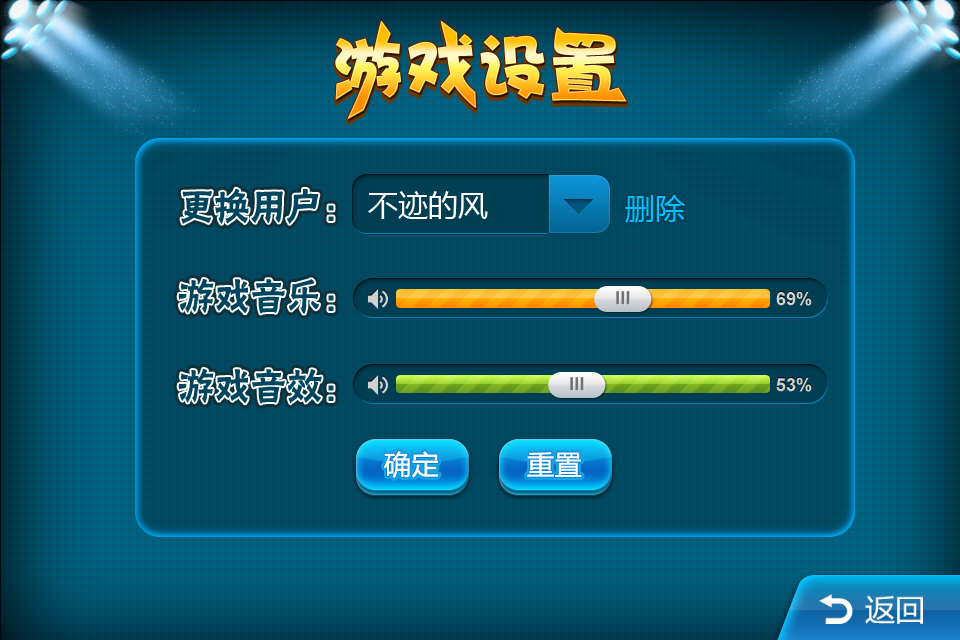
<style>
.page{position:relative;width:960px;height:640px}
.page>*{position:absolute;margin:0}
.t1{font:30px "MicrosoftYaHei";color:#ffffff}
.t2{font:30px "MicrosoftYaHei";color:#00c0ff}
.t3{font:18px "Arial-BoldMT";color:#d0d0d0}
.t4{font:27px "MicrosoftYaHei";color:#ffffff;font-weight:bold}
</style>
<div class="page">
<p class="t1" style="left:368px;top:191px;width:120px;height:28px">不迹的风</p>
<p class="t2" style="left:625px;top:195px;width:60px;height:28px">删除</p>
<p class="t3" style="left:776px;top:291px;width:36px;height:15px">69%</p>
<p class="t3" style="left:776px;top:377px;width:36px;height:15px">53%</p>
<p class="t4" style="left:384px;top:451px;width:55px;height:27px">确定</p>
<p class="t4" style="left:384px;top:451px;width:55px;height:27px">确定</p>
<p class="t4" style="left:527px;top:452px;width:55px;height:25px">重置</p>
<p class="t4" style="left:527px;top:452px;width:55px;height:25px">重置</p>
<p class="t1" style="left:865px;top:595px;width:58px;height:29px">返回</p>
</div>
